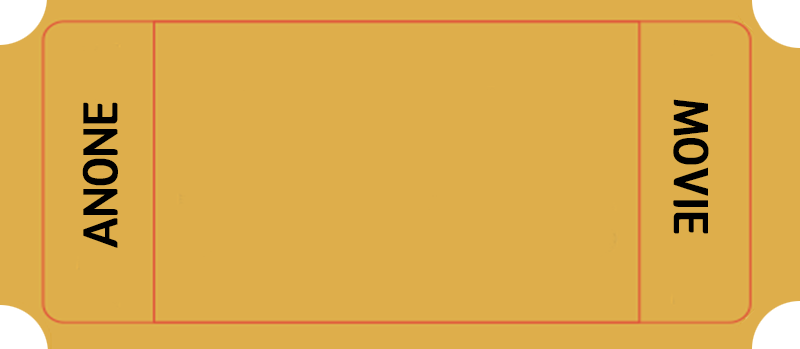
<style>
.page{position:relative;width:800px;height:349px;background:#deae4b}
.page>*{position:absolute;margin:0}
.t1{font:48px "12LotteMartDreamBold";color:#000000;font-weight:bold}
</style>
<div class="page">
<p class="t1" style="left:82px;top:102px;width:36px;height:146px;rotate:-90deg">ANONE</p>
<p class="t1" style="left:673px;top:99px;width:36px;height:135px;rotate:90deg">MOVIE</p>
</div>
